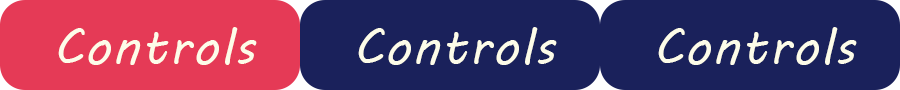
<style>
.page{position:relative;width:900px;height:90px;background:#1a215b}
.page>*{position:absolute;margin:0}
.t1{font:50px "MVBoli";letter-spacing:0.03em;color:#fdfce9}
</style>
<div class="page">
<p class="t1" style="left:58px;top:27px;width:199px;height:38px">Controls</p>
<p class="t1" style="left:358px;top:27px;width:199px;height:38px">Controls</p>
<p class="t1" style="left:658px;top:27px;width:199px;height:38px">Controls</p>
</div>
